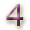
<style>
.page{position:relative;width:30px;height:30px;background:#ffffff}
.page>*{position:absolute;margin:0}
.t1{font:30px "Verdana"}
</style>
<div class="page">
<p class="t1" style="left:6px;top:4px;width:18px;height:22px">4</p>
</div>
